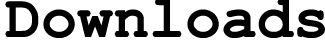
<style>
.page{position:relative;width:325px;height:40px;background:#ffffff}
.page>*{position:absolute;margin:0}
.t1{font:60px "CourierNewPS-BoldMT";color:#000000}
</style>
<div class="page">
<p class="t1" style="left:5px;top:0px;width:320px;height:38px">Downloads</p>
</div>
